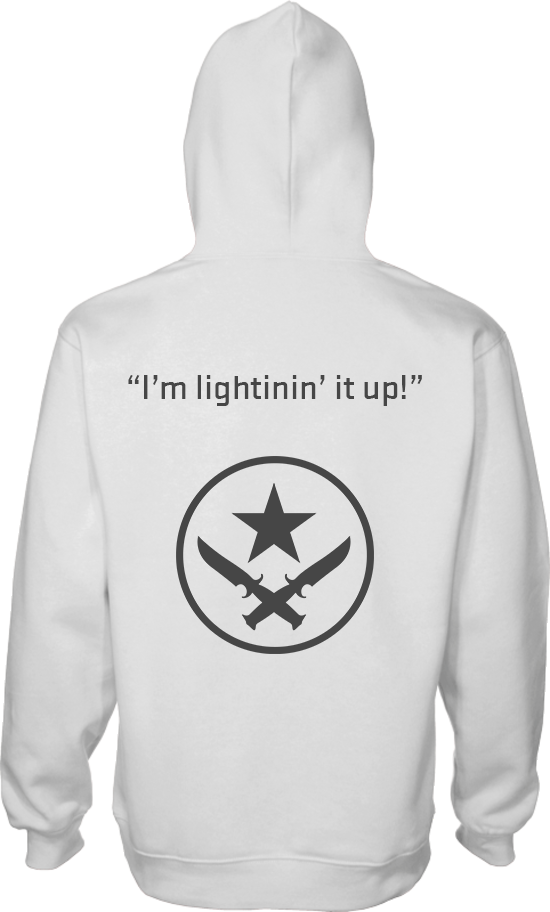
<style>
.page{position:relative;width:550px;height:912px;background:#ffffff}
.page>*{position:absolute;margin:0}
.t1{font:36px "Stratum2-Medium";color:#464646}
</style>
<div class="page">
<p class="t1" style="left:128px;top:375px;width:294px;height:31px">“I’m lightinin’ it up!”</p>
</div>
